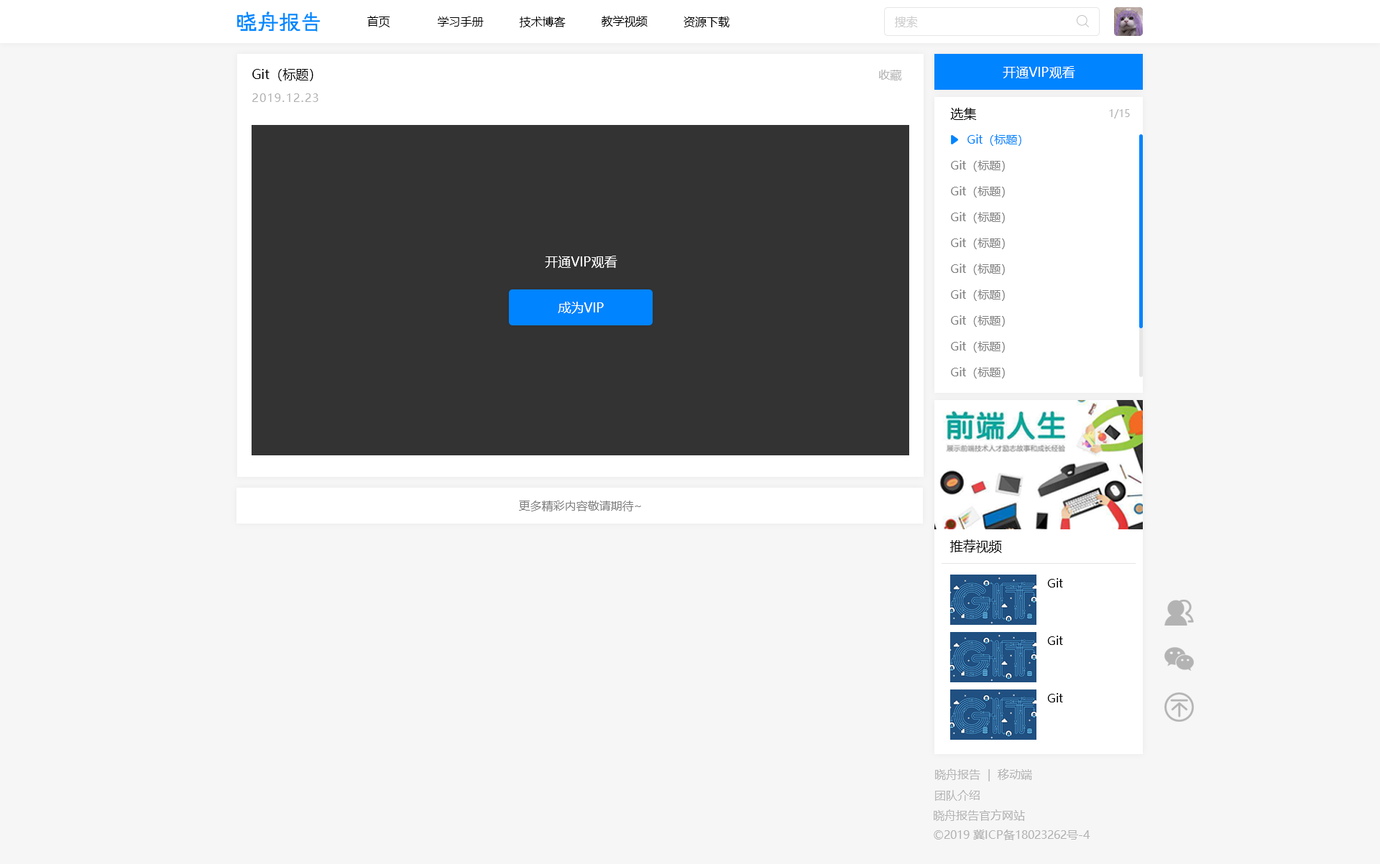
<style>
.page{position:relative;width:1380px;height:864px;background:#f6f6f6}
.page>*{position:absolute;margin:0}
.t1{font:11.5px "MicrosoftYaHei";color:#000000}
.t2{font:11.5px "MicrosoftYaHei";color:#cccccc}
.t3{font:12.9px "MicrosoftYaHei";color:#000000}
.t4{font:11.5px "MicrosoftYaHei";color:#b3b3b3}
.t5{font:12.9px "MicrosoftYaHei";color:#ffffff}
.t6{font:11.5px "MicrosoftYaHei";letter-spacing:0.09em;color:#b3b3b3}
.t7{font:10.1px "MicrosoftYaHei";color:#b3b3b3}
.t8{font:11.5px "MicrosoftYaHei";color:#0084ff}
.t9{font:11.5px "MicrosoftYaHei";color:#808080}
</style>
<div class="page">
<p class="t1" style="left:367px;top:16px;width:23px;height:11px">首页</p>
<p class="t1" style="left:438px;top:17px;width:46px;height:10px">学习手册</p>
<p class="t1" style="left:519px;top:17px;width:46px;height:10px">技术博客</p>
<p class="t1" style="left:601px;top:16px;width:46px;height:11px">教学视频</p>
<p class="t1" style="left:683px;top:17px;width:46px;height:10px">资源下载</p>
<p class="t2" style="left:895px;top:16px;width:23px;height:11px">搜索</p>
<p class="t3" style="left:252px;top:68px;width:61px;height:13px">Git（标题）</p>
<p class="t4" style="left:879px;top:70px;width:23px;height:10px">收藏</p>
<p class="t5" style="left:1002px;top:66px;width:73px;height:12px">开通VIP观看</p>
<p class="t6" style="left:252px;top:93px;width:66px;height:9px">2019.12.23</p>
<p class="t3" style="left:950px;top:108px;width:26px;height:12px">选集</p>
<p class="t7" style="left:1109px;top:109px;width:20px;height:10px">1/15</p>
<p class="t8" style="left:967px;top:134px;width:54px;height:12px">Git（标题）</p>
<p class="t9" style="left:951px;top:160px;width:53px;height:12px">Git（标题）</p>
<p class="t9" style="left:951px;top:186px;width:53px;height:12px">Git（标题）</p>
<p class="t9" style="left:951px;top:212px;width:53px;height:11px">Git（标题）</p>
<p class="t9" style="left:951px;top:238px;width:53px;height:11px">Git（标题）</p>
<p class="t5" style="left:545px;top:256px;width:72px;height:12px">开通VIP观看</p>
<p class="t9" style="left:951px;top:264px;width:53px;height:11px">Git（标题）</p>
<p class="t9" style="left:951px;top:290px;width:53px;height:11px">Git（标题）</p>
<p class="t5" style="left:558px;top:302px;width:46px;height:12px">成为VIP</p>
<p class="t9" style="left:951px;top:315px;width:53px;height:12px">Git（标题）</p>
<p class="t9" style="left:951px;top:341px;width:53px;height:12px">Git（标题）</p>
<p class="t9" style="left:951px;top:367px;width:53px;height:12px">Git（标题）</p>
<p class="t9" style="left:519px;top:501px;width:122px;height:11px">更多精彩内容敬请期待~</p>
<p class="t3" style="left:950px;top:540px;width:52px;height:13px">推荐视频</p>
<p class="t1" style="left:1047px;top:578px;width:16px;height:10px">Git</p>
<p class="t1" style="left:1047px;top:636px;width:16px;height:9px">Git</p>
<p class="t1" style="left:1047px;top:693px;width:16px;height:10px">Git</p>
<p class="t4" style="left:935px;top:769px;width:97px;height:13px">晓舟报告  |  移动端</p>
<p class="t4" style="left:935px;top:790px;width:44px;height:11px">团队介绍</p>
<p class="t4" style="left:933px;top:810px;width:92px;height:11px">晓舟报告官方网站</p>
<p class="t4" style="left:933px;top:830px;width:157px;height:11px">©2019 冀ICP备18023262号-4</p>
</div>
